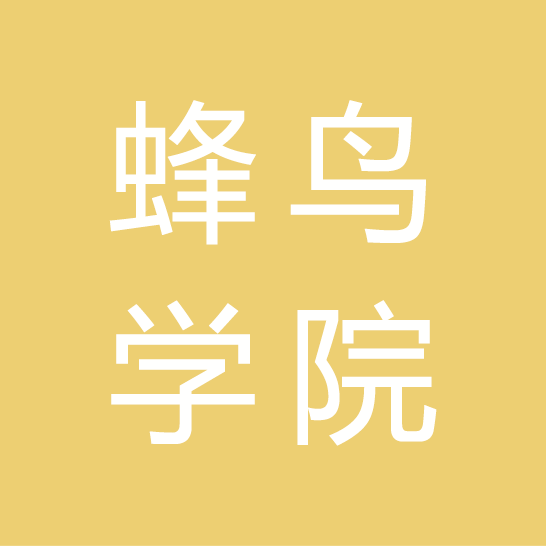
<style>
.page{position:relative;width:549px;height:550px;background:#edcf72}
.page>*{position:absolute;margin:0}
.t1{font:150px/200px "MicrosoftYaHei";letter-spacing:0.2em;color:#fffffe}
</style>
<div class="page">
<p class="t1" style="left:109px;top:100px;width:328px;height:346px">蜂鸟<br>学院</p>
</div>
